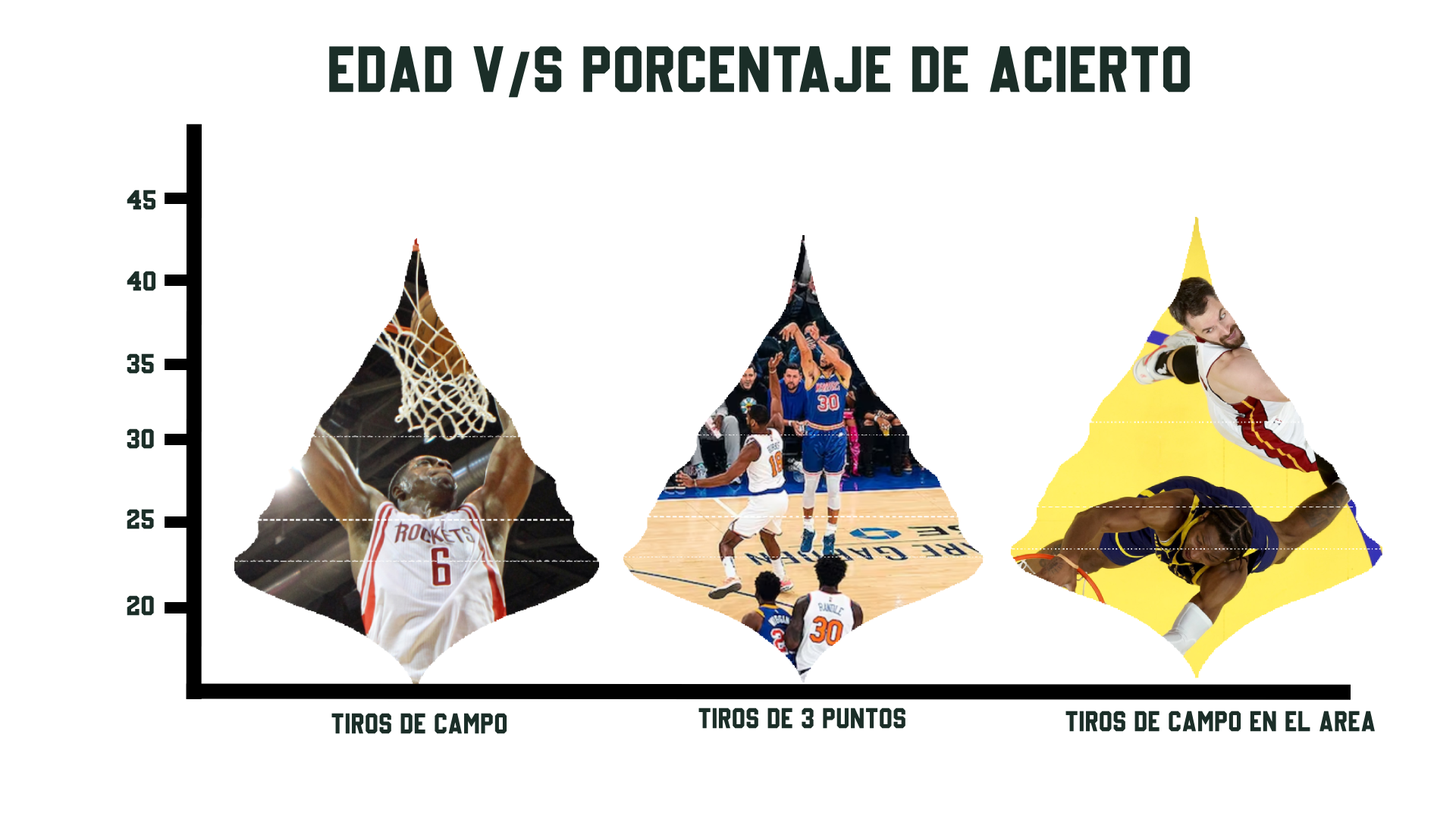
<style>
.page{position:relative;width:1456px;height:819px;background:#ffffff}
.page>*{position:absolute;margin:0}
.t1{font:66.6px "Basketball";color:#1b2e28}
.t2{font:28px "Basketball";color:#1b2e28;scale:1.09 1}
.t3{font:29.2px "Basketball";color:#1b2e28}
</style>
<div class="page">
<p class="t1" style="left:329px;top:46px;width:861px;height:52px">Edad v/S Porcentaje de acierto</p>
<p class="t2" style="left:127px;top:190px;width:28px;height:20px">45</p>
<p class="t2" style="left:127px;top:271px;width:29px;height:20px">40</p>
<p class="t2" style="left:127px;top:353px;width:27px;height:21px">35</p>
<p class="t2" style="left:127px;top:428px;width:27px;height:21px">30</p>
<p class="t2" style="left:127px;top:509px;width:27px;height:20px">25</p>
<p class="t2" style="left:127px;top:595px;width:27px;height:21px">20</p>
<p class="t3" style="left:331px;top:713px;width:176px;height:21px">Tiros de campo</p>
<p class="t3" style="left:698px;top:708px;width:207px;height:21px">Tiros de 3 puntos</p>
<p class="t3" style="left:1065px;top:711px;width:310px;height:21px">Tiros de campo en el area</p>
</div>
